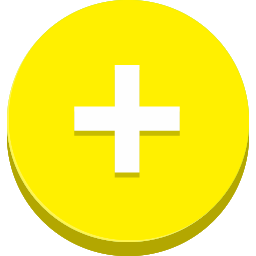
<style>
.page{position:relative;width:256px;height:256px;background:#fff000}
.page>*{position:absolute;margin:0}
.t1{font:180px "FuturaBT-ExtraBlack";letter-spacing:0.1em;color:#fefefe}
</style>
<div class="page">
<p class="t1" style="left:74px;top:65px;width:106px;height:108px">+</p>
</div>
